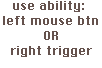
<style>
.page{position:relative;width:102px;height:68px;background:#ffffff}
.page>*{position:absolute;margin:0}
.t1{font:12.4px "ChicagoFLF";color:#65524d}
</style>
<div class="page">
<p class="t1" style="left:3px;top:1px;width:95px;height:56px;text-align:center">use ability: <br>left mouse btn<br>OR<br>right trigger</p>
</div>
